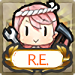
<style>
.page{position:relative;width:75px;height:75px}
.page>*{position:absolute;margin:0}
.t1{font:16px "AdobeClean-Regular";letter-spacing:-0.08em;color:#ff5a00}
</style>
<div class="page">
<p class="t1" style="left:28px;top:54px;width:21px;height:12px">R.E.</p>
</div>
